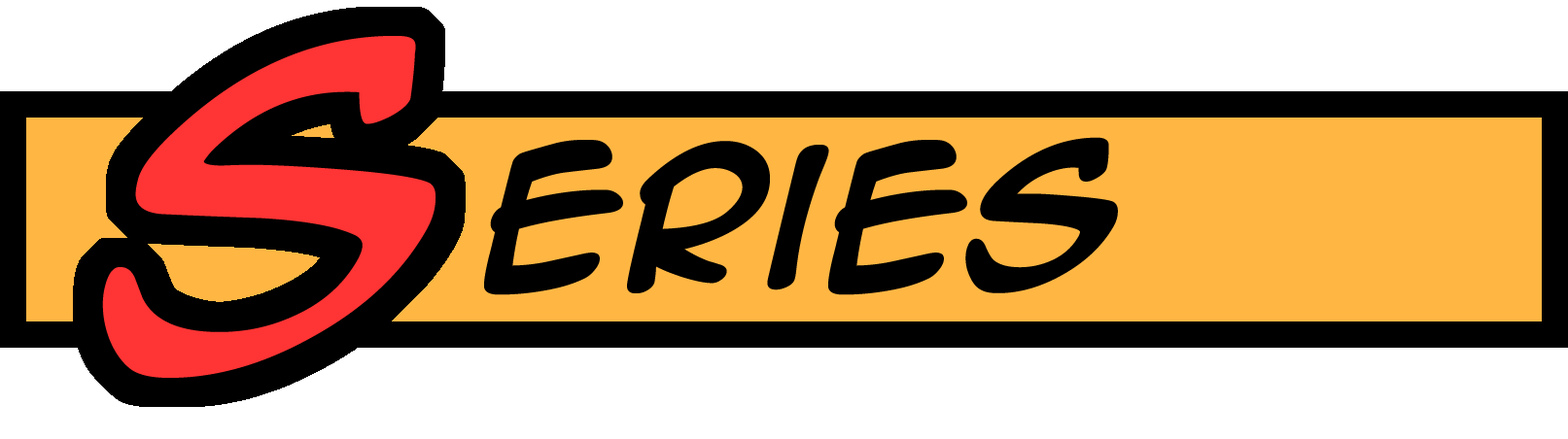
<style>
.page{position:relative;width:1568px;height:439px;background:#ffffff}
.page>*{position:absolute;margin:0}
.t1{font:162px "AnimeAce2.0BB-Bold";color:#000000}
</style>
<div class="page">
<p class="t1" style="left:484px;top:137px;width:634px;height:159px">eries</p>
</div>
